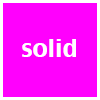
<style>
.page{position:relative;width:100px;height:100px;background:#ff00fd}
.page>*{position:absolute;margin:0}
.t1{font:24px "CharcoalCY";color:#ffffff}
</style>
<div class="page">
<p class="t1" style="left:22px;top:39px;width:54px;height:18px">solid</p>
</div>
